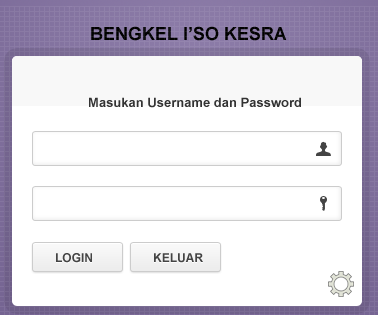
<style>
.page{position:relative;width:379px;height:315px;background:#ffffff}
.page>*{position:absolute;margin:0}
.t1{font:18px "Arial-BoldMT";color:#000000}
.t2{font:13px "Arial-BoldMT";color:#333333}
.t3{font:12px "Arial-BoldMT";color:#444444}
</style>
<div class="page">
<p class="t1" style="left:91px;top:26px;width:196px;height:15px">BENGKEL I’SO KESRA</p>
<p class="t2" style="left:89px;top:97px;width:212px;height:11px">Masukan Username dan Password</p>
<p class="t3" style="left:56px;top:253px;width:36px;height:10px">LOGIN</p>
<p class="t3" style="left:154px;top:253px;width:49px;height:10px">KELUAR</p>
</div>
